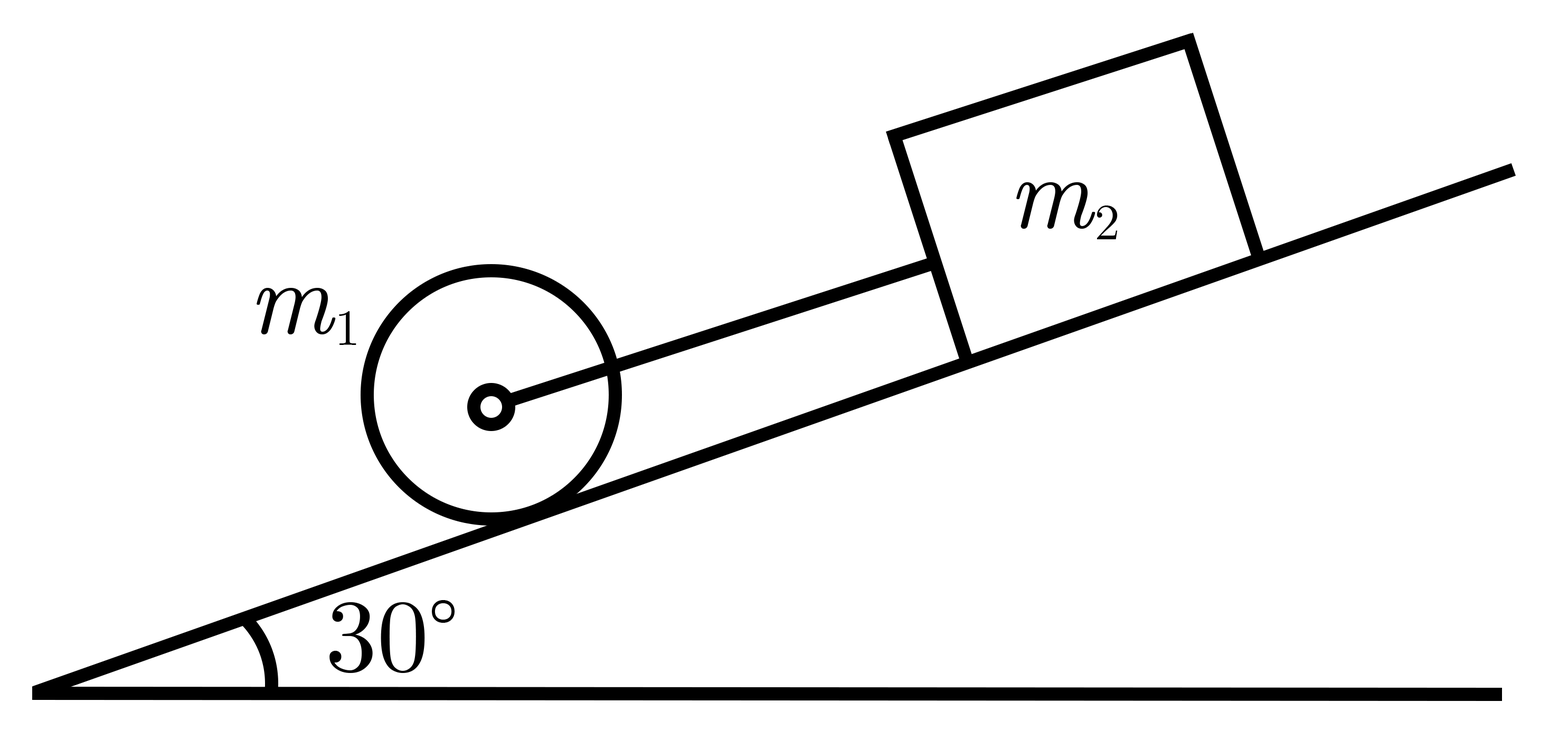
<style>
.page{position:relative;width:1568px;height:739px;background:#ffffff}
.page>*{position:absolute;margin:0}
.t1{font:103.5px "CMUSerif-Italic";color:#000000}
.t2{font:50.7px "CMUSerif-Roman";color:#000000}
.t3{font:103.5px "CMUSerif-Roman";color:#000000}
.t4{font:50.7px "CMUSerif-Bold";color:#000000}
</style>
<div class="page">
<p class="t1" style="left:1016px;top:182px;width:79px;height:47px">m</p>
<p class="t2" style="left:1097px;top:205px;width:21px;height:34px">2</p>
<p class="t1" style="left:257px;top:288px;width:79px;height:46px">m</p>
<p class="t2" style="left:339px;top:311px;width:17px;height:34px">1</p>
<p class="t3" style="left:329px;top:602px;width:96px;height:71px">30</p>
<p class="t4" style="left:432px;top:600px;width:23px;height:22px">◦</p>
</div>
